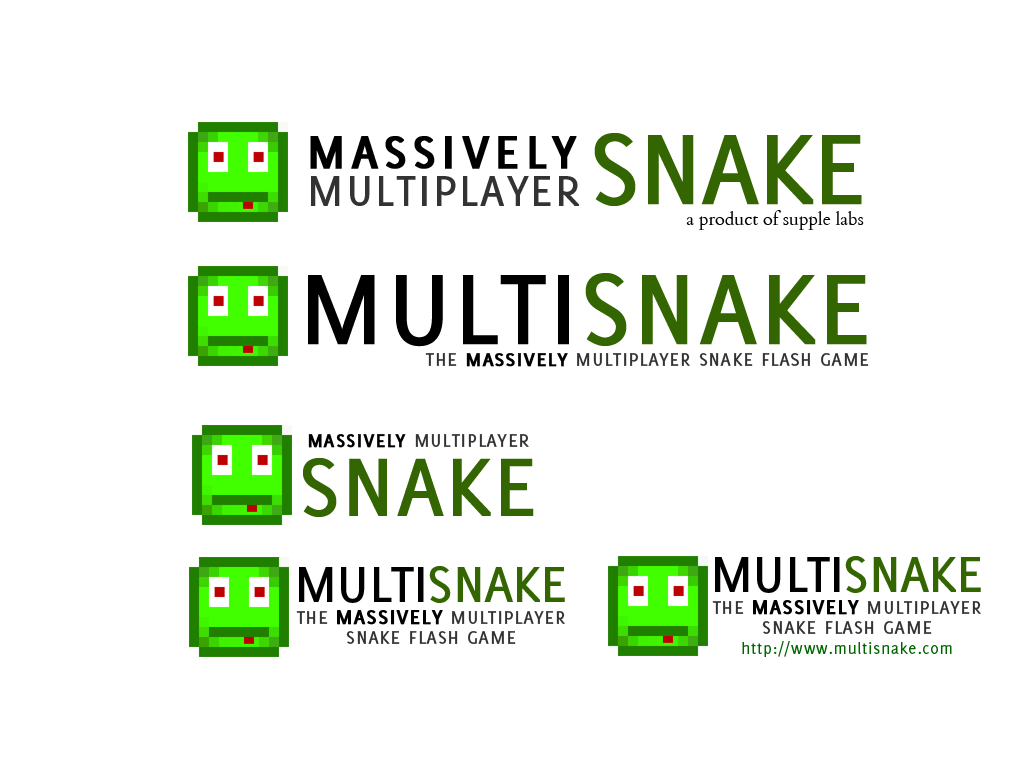
<style>
.page{position:relative;width:1024px;height:768px;background:#ffffff}
.page>*{position:absolute;margin:0}
.t1{font:60px "Delicious-SmallCaps";letter-spacing:0.05em;color:#000000;font-weight:bold}
.t2{font:135px "Delicious-SmallCaps";letter-spacing:-0.05em;color:#336600}
.t3{font:57px "Delicious-SmallCaps";color:#333333}
.t4{font:18px "Cardo";color:#000000}
.t5{font:135px "Delicious-SmallCaps";letter-spacing:-0.025em;color:#000000}
.t6{font:135px "Delicious-SmallCaps";letter-spacing:-0.025em;color:#336600}
.t7{font:24px "Delicious-SmallCaps";color:#333333}
.t8{font:25px "Delicious-SmallCaps";color:#000000;font-weight:bold}
.t9{font:24px "Delicious-SmallCaps";color:#000000;font-weight:bold}
.t10{font:110px "Delicious-SmallCaps";letter-spacing:-0.025em;color:#336600}
.t11{font:68px "Delicious-SmallCaps";letter-spacing:-0.05em;color:#000000}
.t12{font:68px "Delicious-SmallCaps";letter-spacing:-0.05em;color:#336600}
.t13{font:24px/20px "Delicious-SmallCaps";color:#333333}
.t14{font:26px/20px "Delicious-SmallCaps";color:#000000;font-weight:bold}
.t15{font:17px/20px "Delicious-Roman";letter-spacing:0.05em;color:#006600}
</style>
<div class="page">
<p class="t1" style="left:310px;top:136px;width:267px;height:33px">massively</p>
<p class="t2" style="left:594px;top:133px;width:268px;height:73px">snake</p>
<p class="t3" style="left:311px;top:175px;width:268px;height:31px">multiplayer</p>
<p class="t4" style="left:686px;top:210px;width:178px;height:20px">a product of supple labs</p>
<p class="t5" style="left:308px;top:273px;width:559px;height:74px">multi<span class="t6">snake</span></p>
<p class="t7" style="left:425px;top:353px;width:444px;height:14px">the <span class="t8">massively </span>multiplayer snake flash game</p>
<p class="t7" style="left:308px;top:434px;width:221px;height:14px"><span class="t9">massively </span>multiplayer</p>
<p class="t10" style="left:303px;top:457px;width:231px;height:60px">snake</p>
<p class="t11" style="left:715px;top:556px;width:266px;height:37px">multi<span class="t12">snake</span></p>
<p class="t11" style="left:299px;top:566px;width:266px;height:37px">multi<span class="t12">snake</span></p>
<p class="t13" style="left:712px;top:600px;width:269px;height:57px;text-align:center">the <span class="t14">massively </span>multiplayer<br>snake flash game<br><span class="t15">http://www.multisnake.com</span></p>
<p class="t13" style="left:296px;top:610px;width:269px;height:34px;text-align:center">the <span class="t14">massively </span>multiplayer<br>snake flash game</p>
</div>
